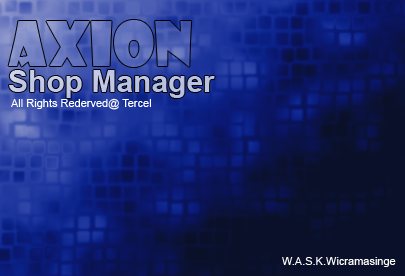
<style>
.page{position:relative;width:405px;height:276px}
.page>*{position:absolute;margin:0}
.t1{font:60px "ShowcardGothic-Reg"}
.t2{font:30px "Arial-BoldMT";color:#bfc6e4}
.t3{font:11px "ArialMT";color:#ffffff}
</style>
<div class="page">
<p class="t1" style="left:8px;top:20px;width:184px;height:47px">AXION</p>
<p class="t2" style="left:9px;top:70px;width:206px;height:28px">Shop Manager</p>
<p class="t3" style="left:11px;top:98px;width:140px;height:12px">All Rights Rederved@ Tercel</p>
<p class="t3" style="left:282px;top:257px;width:114px;height:10px">W.A.S.K.Wicramasinge</p>
</div>
